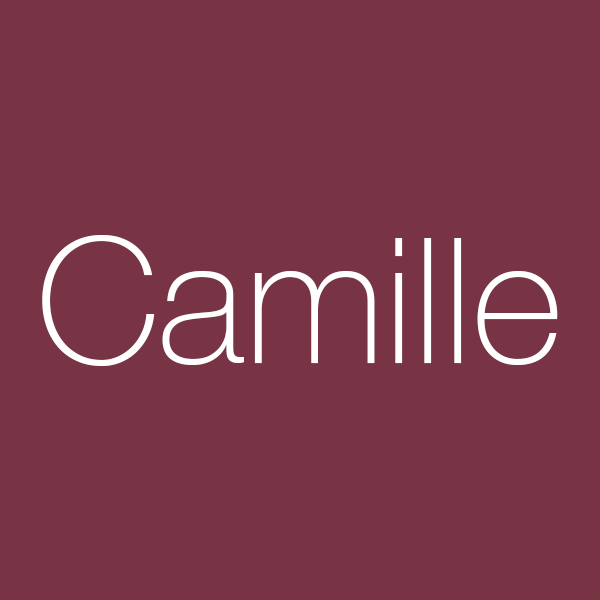
<style>
.page{position:relative;width:600px;height:600px;background:#783344}
.page>*{position:absolute;margin:0}
.t1{font:175px "HelveticaNeue-Thin";color:#ffffff}
</style>
<div class="page">
<p class="t1" style="left:42px;top:235px;width:516px;height:131px">Camille</p>
</div>
